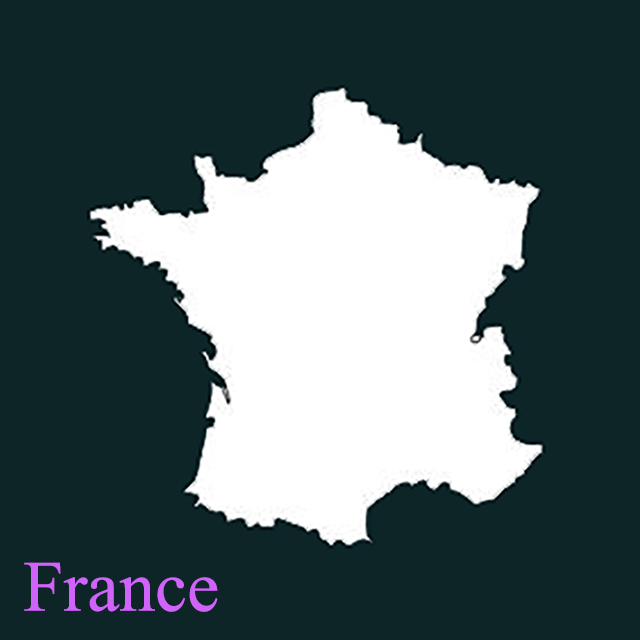
<style>
.page{position:relative;width:640px;height:640px;background:#0e2528}
.page>*{position:absolute;margin:0}
.t1{font:72px "TimesNewRomanPSMT";color:#d063fa}
</style>
<div class="page">
<p class="t1" style="left:24px;top:562px;width:194px;height:50px">France</p>
</div>
